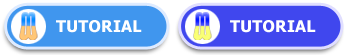
<style>
.page{position:relative;width:348px;height:55px;background:#4096ee}
.page>*{position:absolute;margin:0}
.t1{font:16px "Tahoma-Bold";letter-spacing:0.02em;color:#ffffff}
</style>
<div class="page">
<p class="t1" style="left:56px;top:20px;width:86px;height:13px">TUTORIAL</p>
</div>
